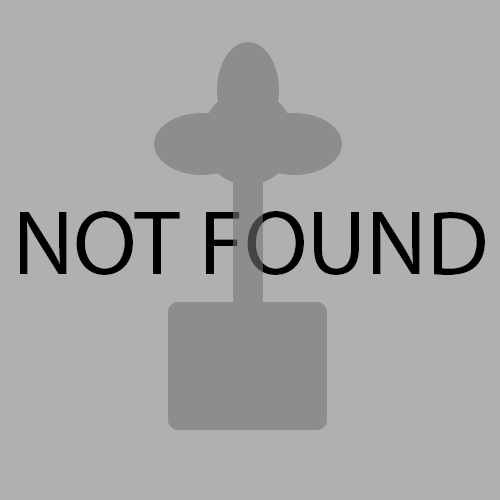
<style>
.page{position:relative;width:500px;height:500px;background:#b0b0b0}
.page>*{position:absolute;margin:0}
.t1{font:91.7px "MyriadPro-Regular";color:#000000}
</style>
<div class="page">
<p class="t1" style="left:20px;top:211px;width:465px;height:64px">NOT FOUND</p>
</div>
